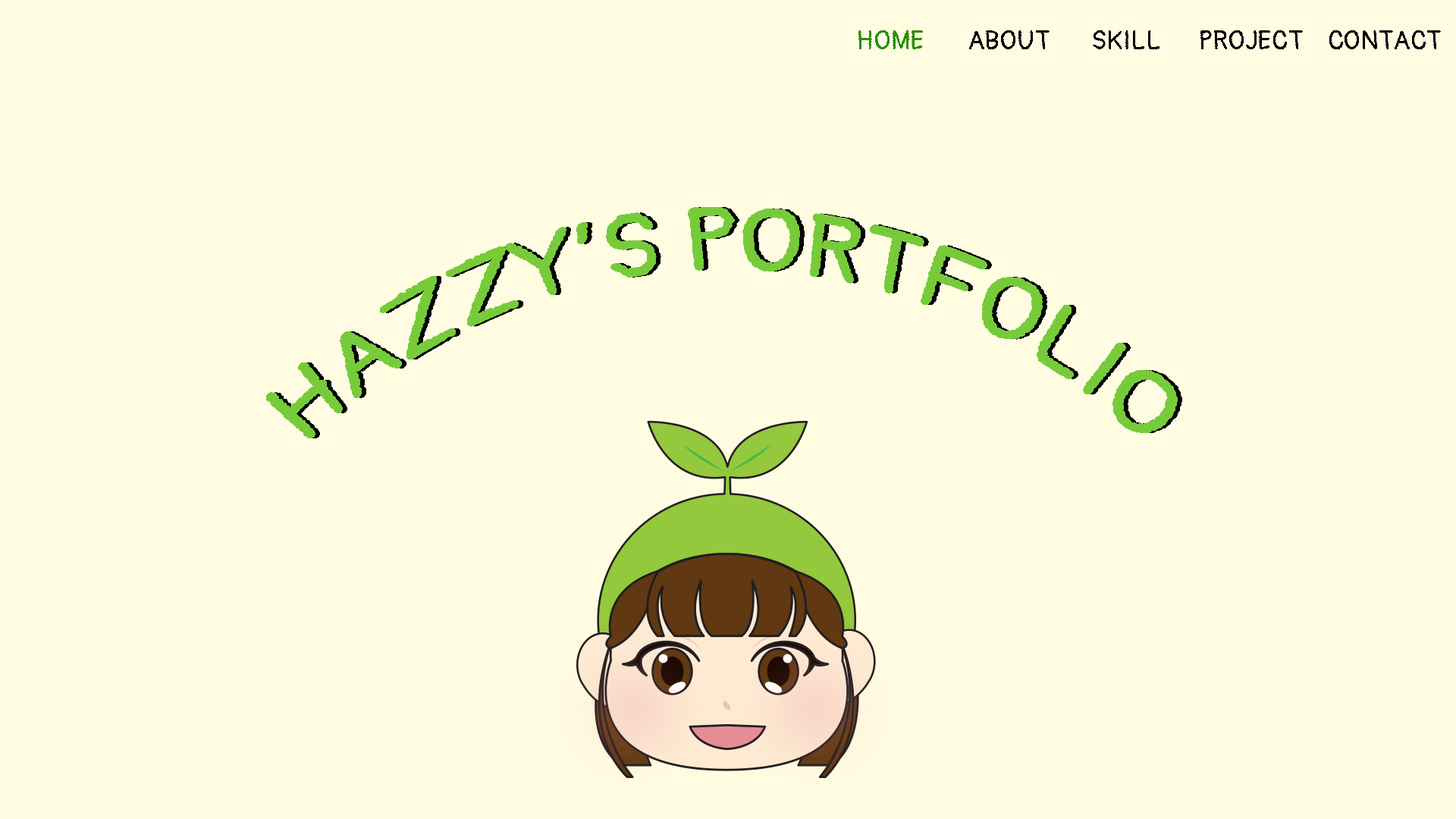
<style>
.page{position:relative;width:1456px;height:819px;background:#fffce1}
.page>*{position:absolute;margin:0}
.t1{font:26.5px "Pangolin-Regular";color:#298e02}
.t2{font:26.5px "Pangolin-Regular";color:#000000}
.t3{font:87px/49.9px "Pangolin-Regular";color:#77cb3a}
.t4{font:87px/49.9px "Pangolin-Regular"}
</style>
<div class="page">
<p class="t1" style="left:858px;top:30px;width:65px;height:19px">HOME</p>
<p class="t2" style="left:969px;top:30px;width:81px;height:19px">ABOUT</p>
<p class="t2" style="left:1093px;top:30px;width:66px;height:19px">SKILL</p>
<p class="t2" style="left:1200px;top:30px;width:103px;height:19px">PROJECT</p>
<p class="t2" style="left:1329px;top:30px;width:112px;height:19px">CONTACT</p>
<p class="t3" style="left:266px;top:207px;width:912px;height:231px">HAZZY’S PORTFOLIO</p>
<p class="t4" style="left:271px;top:207px;width:911px;height:231px">HAZZY’S PORTFOLIO</p>
</div>
